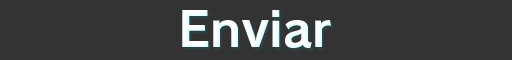
<style>
.page{position:relative;width:512px;height:60px;background:#333333}
.page>*{position:absolute;margin:0}
.t1{font:48px "RodinPro-B";color:#fffeff}
</style>
<div class="page">
<p class="t1" style="left:182px;top:10px;width:149px;height:38px">Enviar</p>
</div>
